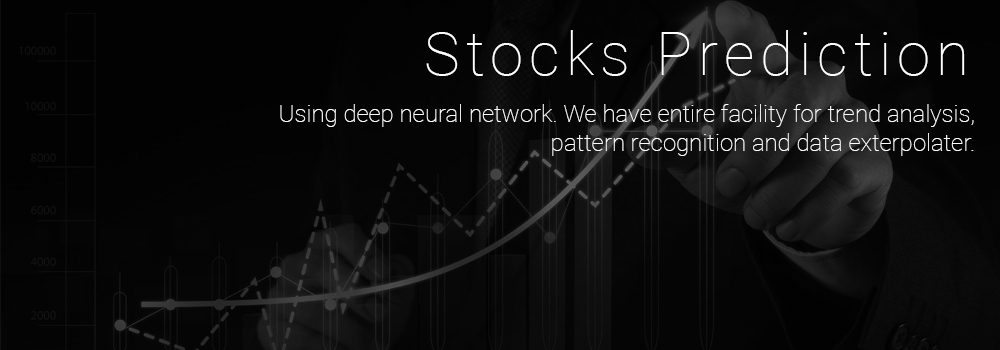
<style>
.page{position:relative;width:1000px;height:350px}
.page>*{position:absolute;margin:0}
.t1{font:60px "Roboto-Thin";letter-spacing:0.1em;color:#ffffff}
.t2{font:24px "Roboto-Thin";color:#ffffff}
</style>
<div class="page">
<p class="t1" style="left:426px;top:30px;width:539px;height:46px">Stocks Prediction</p>
<p class="t2" style="left:280px;top:104px;width:694px;height:52px;text-align:right">Using deep neural network. We have entire facility for trend analysis,<br>pattern recognition and data exterpolater.</p>
</div>
